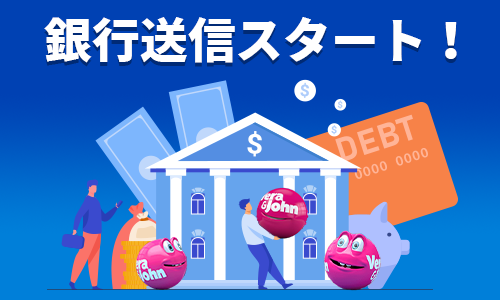
<style>
.page{position:relative;width:500px;height:300px;background:#0041b3}
.page>*{position:absolute;margin:0}
.t1{font:50px "KintoSans-Black";color:#ffffff}
</style>
<div class="page">
<p class="t1" style="left:44px;top:17px;width:413px;height:46px">銀行送信スタート！</p>
</div>
